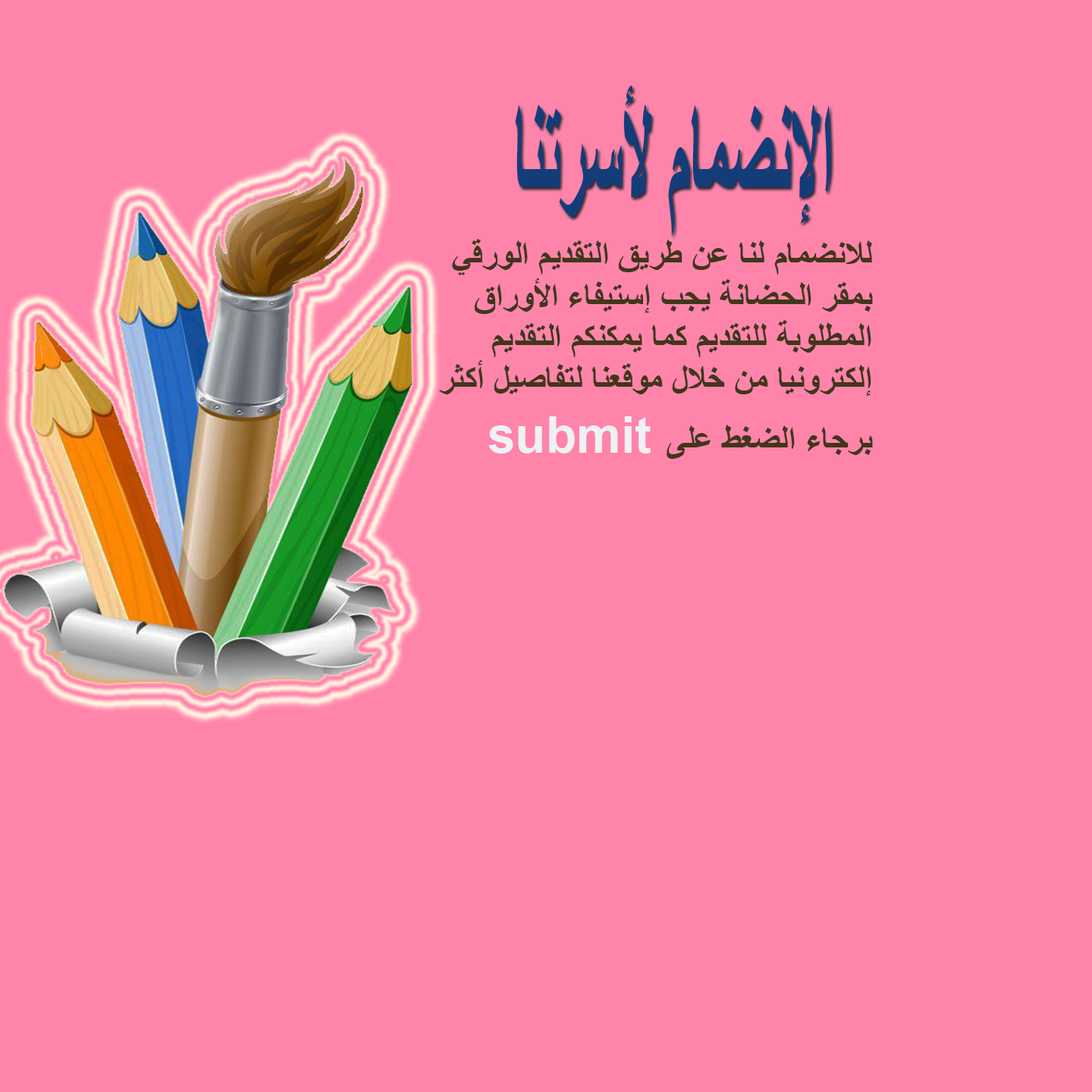
<style>
.page{position:relative;width:1092px;height:1092px;background:#ff84aa}
.page>*{position:absolute;margin:0}
.t1{font:138.7px "Arial-BoldMT";color:#16468a;scale:0.43 1}
.t2{font:34.7px "Arial-BoldMT";color:#42361a}
.t3{font:50.1px "Arial-BoldMT";color:#f6f7f9}
</style>
<div class="page">
<p class="t1" style="left:515px;top:86px;width:316px;height:151px">الإنضمام لأسرتنا</p>
<p class="t2" style="left:439px;top:239px;width:434px;height:220px">للانضمام لنا عن طريق التقديم الورقي بمقر الحضانة يجب إستيفاء الأوراق المطلوبة للتقديم كما يمكنكم التقديم إلكترونيا من خلال موقعنا لتفاصيل أكثر برجاء الضغط على</p>
<p class="t3" style="left:488px;top:416px;width:163px;height:37px">submit</p>
</div>
